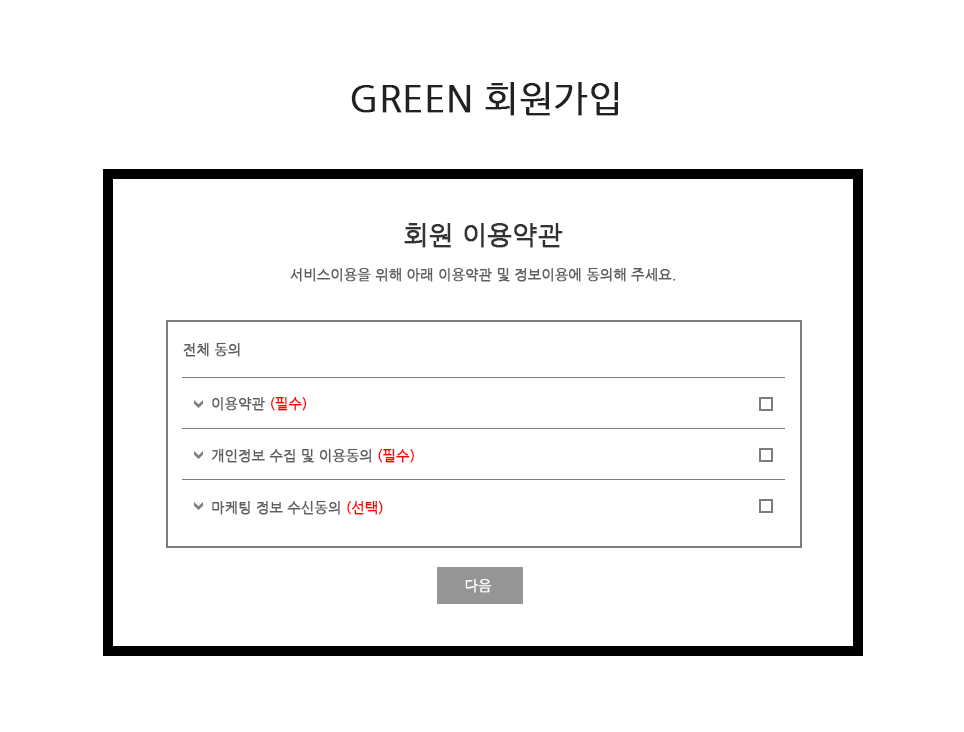
<style>
.page{position:relative;width:964px;height:732px;background:#ffffff}
.page>*{position:absolute;margin:0}
.t1{font:36px "NanumGothic";color:#212121;font-weight:bold}
.t2{font:14px/36px "NanumGothic";color:#5e5e5e;font-weight:bold}
.t3{font:26px/36px "NanumGothic";color:#333333;font-weight:bold}
.t4{font:14px "NanumGothic";color:#5e5e5e;font-weight:bold}
.t5{font:14px/52px "NanumGothic";color:#5e5e5e;font-weight:bold}
.t6{font:14px/52px "NanumGothic";color:#ff0000;font-weight:bold}
.t7{font:14px "NanumGothic";color:#ffffff;font-weight:bold}
</style>
<div class="page">
<p class="t1" style="left:351px;top:82px;width:267px;height:34px">GREEN 회원가입</p>
<p class="t2" style="left:290px;top:223px;width:386px;height:59px;text-align:center"><span class="t3">회원 이용약관<br></span>서비스이용을 위해 아래 이용약관 및 정보이용에 동의해 주세요.</p>
<p class="t4" style="left:183px;top:342px;width:57px;height:15px">전체 동의</p>
<p class="t5" style="left:212px;top:396px;width:202px;height:119px">이용약관 <span class="t6">(필수)<br></span>개인정보 수집 및 이용동의 <span class="t6">(필수)<br></span>마케팅 정보 수신동의 <span class="t6">(선택)</span></p>
<p class="t7" style="left:465px;top:578px;width:27px;height:15px">다음</p>
</div>
